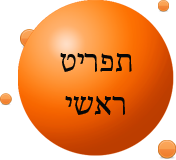
<style>
.page{position:relative;width:176px;height:160px;background:#ffffff}
.page>*{position:absolute;margin:0}
.t1{font:36px "AdobeHebrew-Regular";color:#070707}
</style>
<div class="page">
<p class="t1" style="left:60px;top:53px;width:72px;height:62px;text-align:center">טירפת<br>ישאר</p>
</div>
